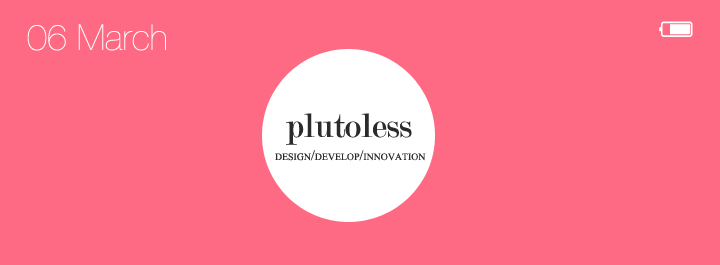
<style>
.page{position:relative;width:720px;height:265px;background:#fe6a84}
.page>*{position:absolute;margin:0}
.t1{font:36px "HelveticaNeueLTStd-UltLt";color:#ffffff}
.t2{font:36px "Modern-Regular";color:#2b2b2b}
.t3{font:14px "MongolianBaiti";color:#2b2b2b;font-variant:small-caps}
</style>
<div class="page">
<p class="t1" style="left:27px;top:24px;width:139px;height:27px">06 March</p>
<p class="t2" style="left:286px;top:113px;width:126px;height:32px">plutoless</p>
<p class="t3" style="left:275px;top:150px;width:151px;height:11px">design/develop/innovation</p>
</div>
